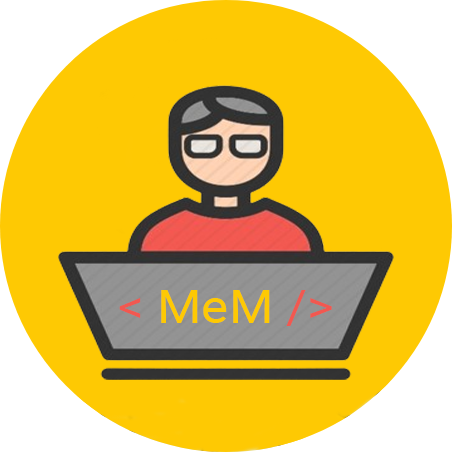
<style>
.page{position:relative;width:452px;height:452px;background:#fec903}
.page>*{position:absolute;margin:0}
.t1{font:46.2px "Roboto-Regular";color:#fec903;scale:1.11 1}
.t2{font:46.2px "Roboto-Regular";color:#f25850;scale:1.11 1}
</style>
<div class="page">
<p class="t1" style="left:119px;top:290px;width:213px;height:36px"><span class="t2">&gt;/</span> MeM <span class="t2">&lt;</span></p>
</div>
